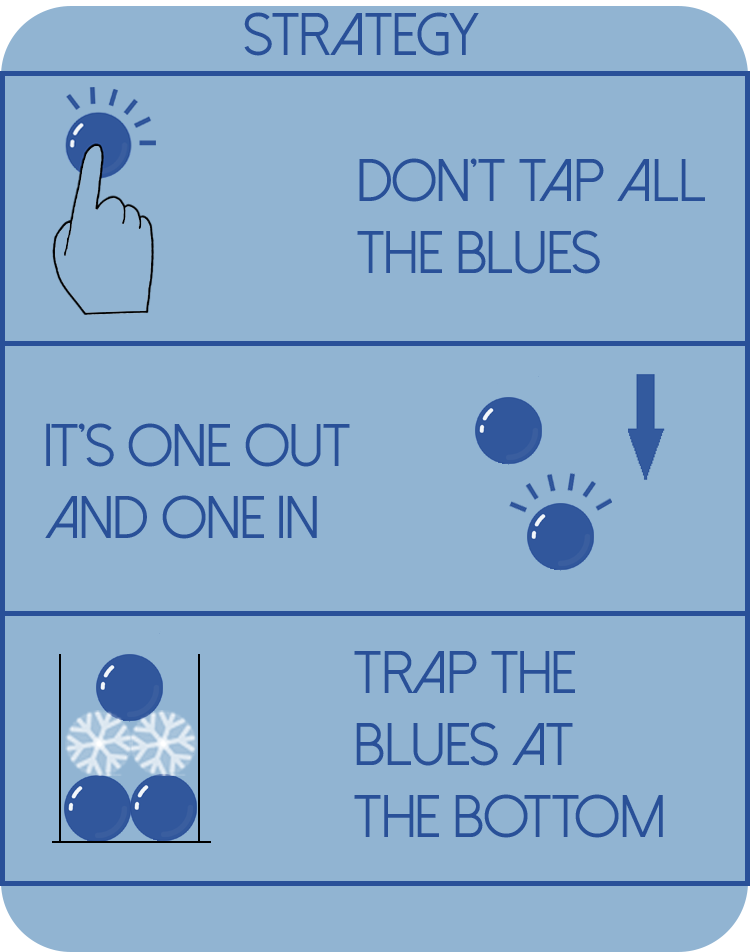
<style>
.page{position:relative;width:750px;height:952px;background:#91b4d2}
.page>*{position:absolute;margin:0}
.t1{font:60px "DolceVita";color:#295098}
</style>
<div class="page">
<p class="t1" style="left:244px;top:12px;width:235px;height:44px">STRATEGY</p>
<p class="t1" style="left:357px;top:158px;width:348px;height:116px">Don’t Tap all <br>the Blues</p>
<p class="t1" style="left:45px;top:423px;width:305px;height:116px">It’s ONE OUT<br>AND ONE IN</p>
<p class="t1" style="left:354px;top:651px;width:309px;height:187px">TRAP THE <br>BLUES AT<br>THE BOTTOM</p>
</div>
